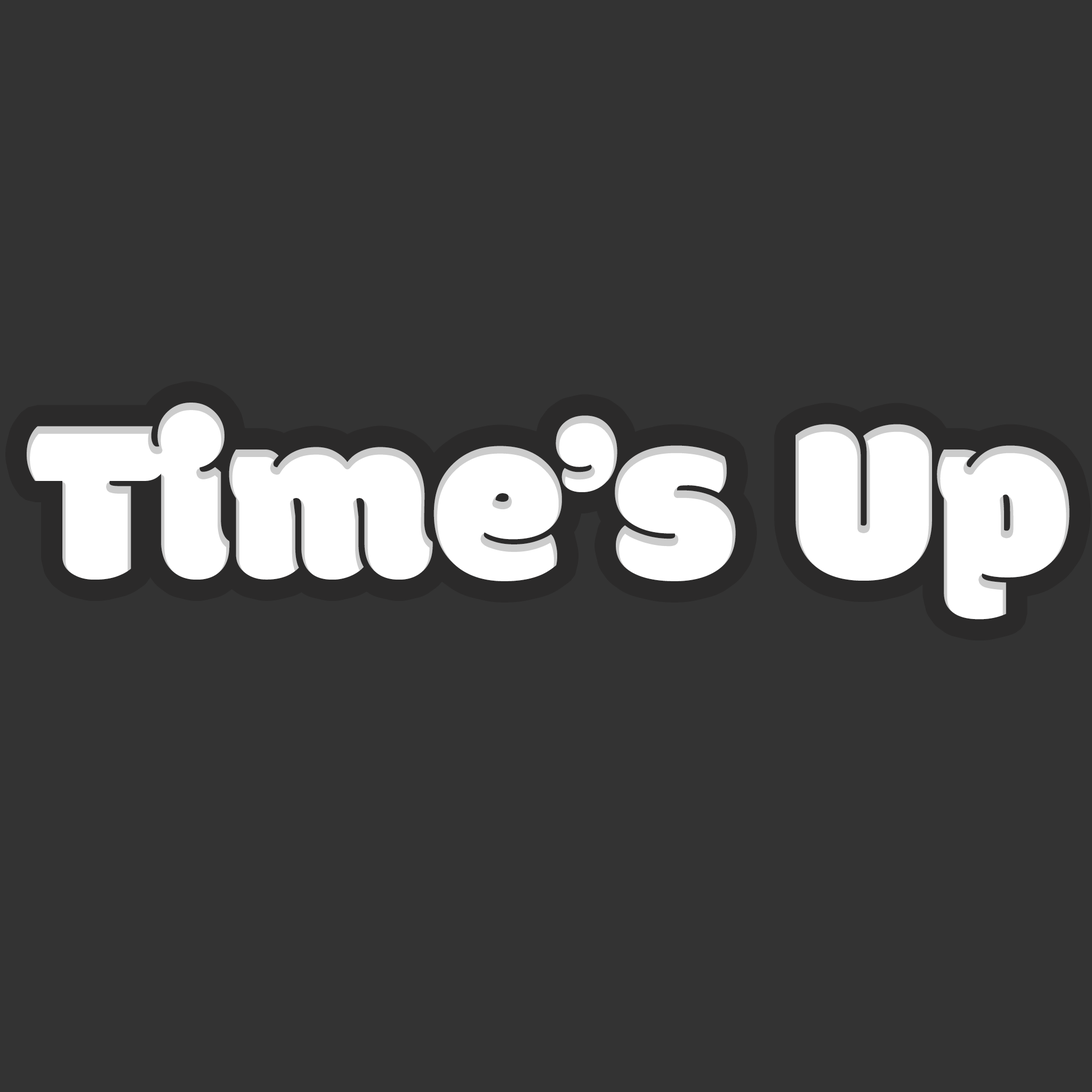
<style>
.page{position:relative;width:1092px;height:1092px;background:#333333}
.page>*{position:absolute;margin:0}
.t1{font:239.8px "Modak";color:#ffffff}
</style>
<div class="page">
<p class="t1" style="left:27px;top:403px;width:1043px;height:217px">Time’s Up</p>
</div>
